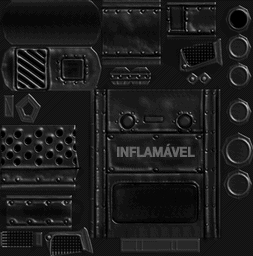
<style>
.page{position:relative;width:253px;height:256px;background:#101010}
.page>*{position:absolute;margin:0}
.t1{font:14px "HelveticaNeue-Bold";letter-spacing:-0.02em;color:#636363;text-transform:uppercase;font-weight:bold;scale:0.87 1}
</style>
<div class="page">
<p class="t1" style="left:117px;top:143px;width:78px;height:14px">inflamável</p>
</div>
